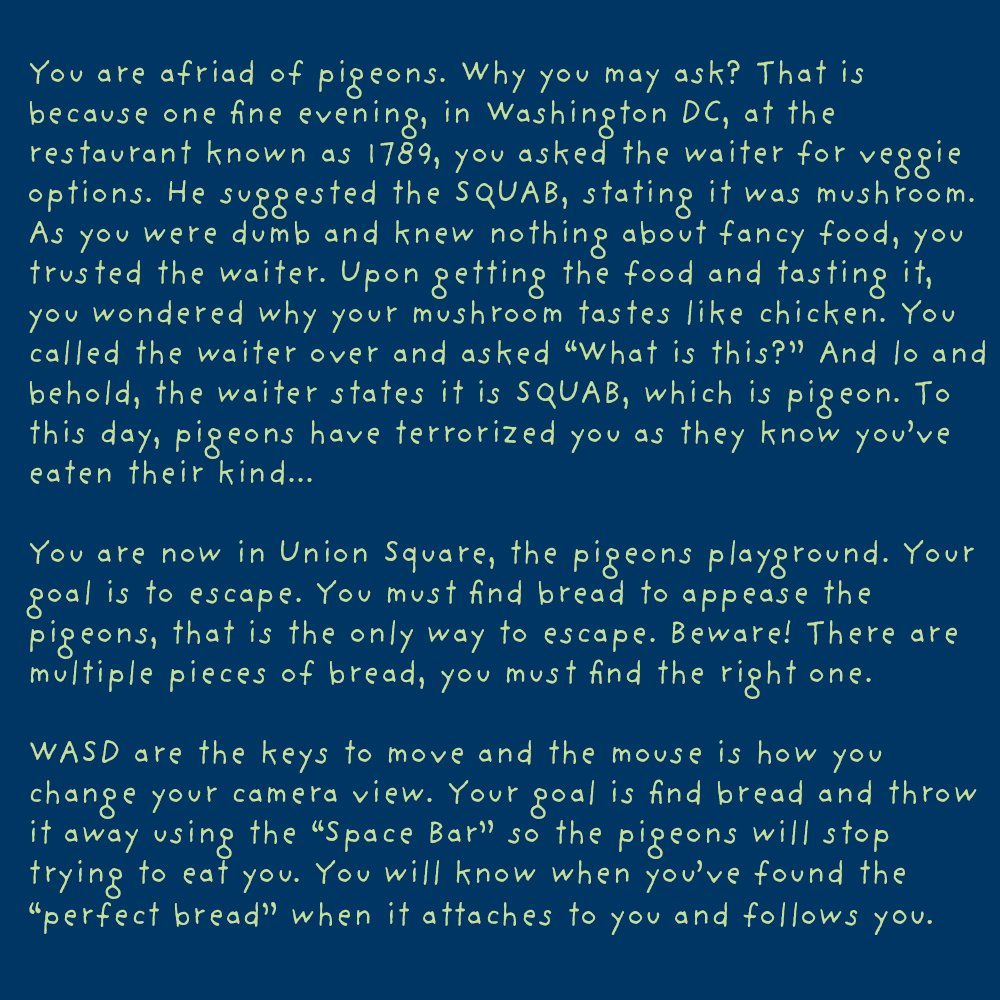
<style>
.page{position:relative;width:1000px;height:1000px;background:#003663}
.page>*{position:absolute;margin:0}
.t1{font:33.3px "ProvidenceSansPro";color:#c4df9b}
.t2{font:34.6px "ProvidenceSansPro";color:#c4df9b}
</style>
<div class="page">
<p class="t1" style="left:26px;top:60px;width:959px;height:875px">You are afriad of pigeons. Why you may ask? That is because one fine evening, in Washington DC, at the restaurant known as 1789, you asked the waiter for veggie options. He suggested the SQUAB, stating it was mushroom. As you were dumb and knew nothing about fancy food, you trusted the waiter. Upon getting the food and tasting it, you wondered why your mushroom tastes like chicken. You called the waiter over and asked “What is this?” And lo and behold, the waiter states it is SQUAB, which is pigeon. To this day, pigeons have terrorized you as they know you’ve eaten their kind...<br><br>You are now in Union Square, the pigeons playground. Your goal is to escape. You must find bread to appease the pigeons, that is the only way to escape. Beware! There are multiple pieces of bread, you must find the right one. <br><br>WASD are the keys to move and the mouse is how you change your camera view. Your goal is find bread and throw it away using the “Space Bar” so the pigeons will stop trying to eat you. You will know when you’ve found the “perfect bread” when it attaches to you and follows <span class="t2">you.</span></p>
</div>
